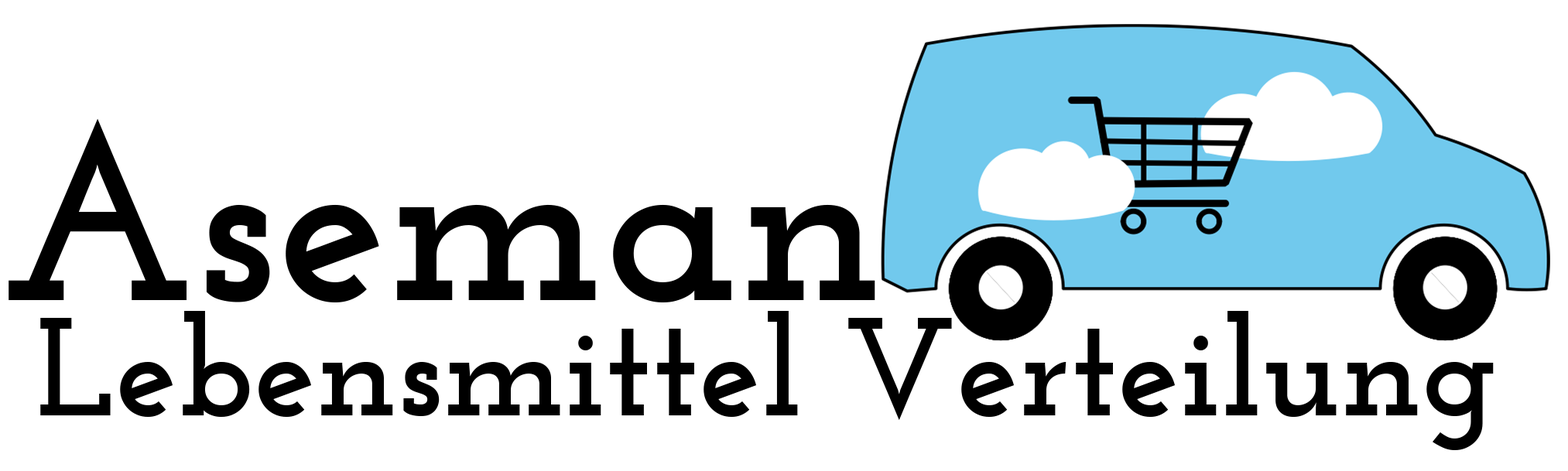
<style>
.page{position:relative;width:1568px;height:471px;background:#ffffff}
.page>*{position:absolute;margin:0}
.t1{font:247.7px "JosefinSlab-Bold";color:#000000}
.t2{font:139.3px "JosefinSlab-Bold";color:#000000}
</style>
<div class="page">
<p class="t1" style="left:9px;top:118px;width:866px;height:185px">Aseman</p>
<p class="t2" style="left:40px;top:311px;width:1454px;height:139px">Lebensmittel Verteilung</p>
</div>
